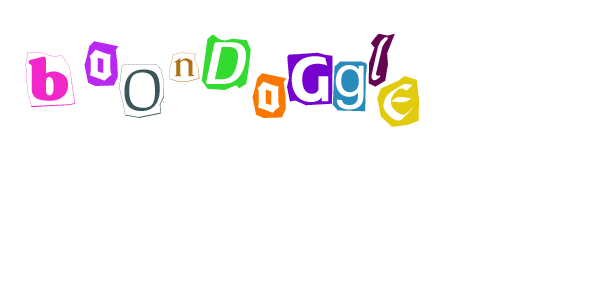
<style>
.page{position:relative;width:600px;height:300px;background:#ffffff}
.page>*{position:absolute;margin:0}
.t1{font:60px "Ransom";color:#bb27f2}
.t2{font:60px "Ransom";color:#33da2f}
.t3{font:60px "Ransom";color:#660252}
.t4{font:60px "Ransom";color:#f227c9}
.t5{font:60px "Ransom";color:#af7213}
.t6{font:60px "Ransom";color:#7502ce}
.t7{font:60px "Ransom";color:#3b565a}
.t8{font:60px "Ransom";color:#298abc}
.t9{font:60px "Ransom";color:#fc7700}
.t10{font:60px "Ransom";color:#e2cb0c}
</style>
<div class="page">
<p class="t1" style="left:84px;top:41px;width:35px;height:45px">o</p>
<p class="t2" style="left:201px;top:34px;width:50px;height:56px">D</p>
<p class="t3" style="left:368px;top:33px;width:27px;height:54px">l</p>
<p class="t4" style="left:25px;top:52px;width:50px;height:56px">b</p>
<p class="t5" style="left:169px;top:52px;width:31px;height:30px">n</p>
<p class="t6" style="left:287px;top:52px;width:46px;height:54px">G</p>
<p class="t7" style="left:119px;top:64px;width:45px;height:54px">O</p>
<p class="t8" style="left:332px;top:61px;width:35px;height:51px">g</p>
<p class="t9" style="left:252px;top:73px;width:35px;height:45px">o</p>
<p class="t10" style="left:377px;top:76px;width:42px;height:51px">e</p>
</div>
